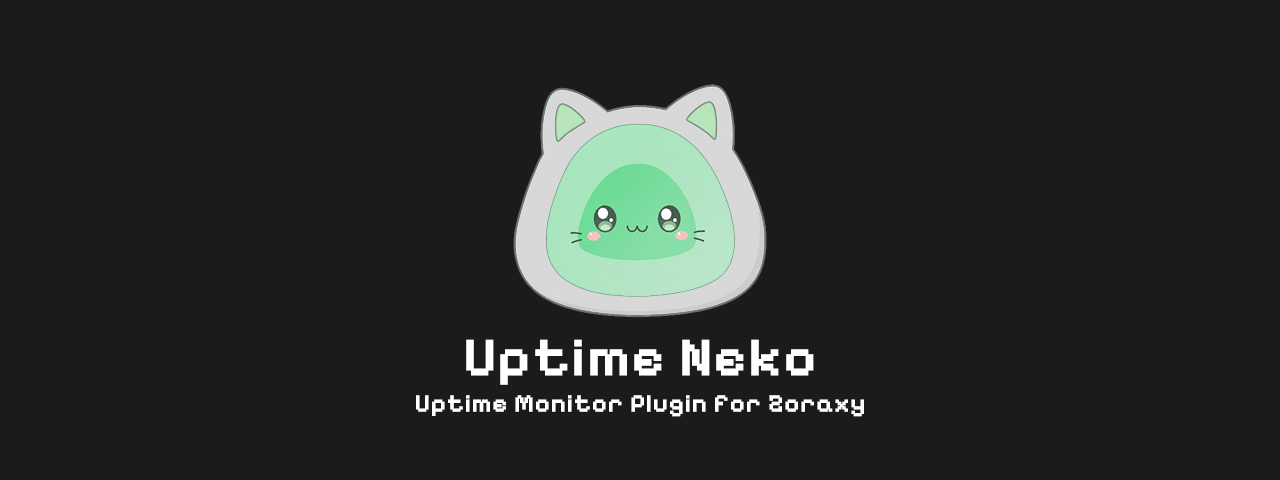
<style>
.page{position:relative;width:1280px;height:480px;background:#1b1b1b}
.page>*{position:absolute;margin:0}
.t1{font:54.2px "PixelifySans-Medium";letter-spacing:0.02em;color:#ffffff;font-weight:bold}
.t2{font:25px "PixelifySans-Medium";letter-spacing:0.02em;color:#ffffff;font-weight:bold}
</style>
<div class="page">
<p class="t1" style="left:466px;top:339px;width:348px;height:46px">Uptime Neko</p>
<p class="t2" style="left:416px;top:395px;width:448px;height:22px">Uptime Monitor Plugin for Zoraxy</p>
</div>
